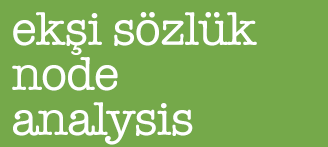
<style>
.page{position:relative;width:328px;height:147px;background:#75a94a}
.page>*{position:absolute;margin:0}
.t1{font:48px/45px "AmericanTypewriter";letter-spacing:-0.02em;color:#ffffff}
</style>
<div class="page">
<p class="t1" style="left:12px;top:12px;width:245px;height:133px">ekşi sözlük<br>node<br>analysis</p>
</div>
